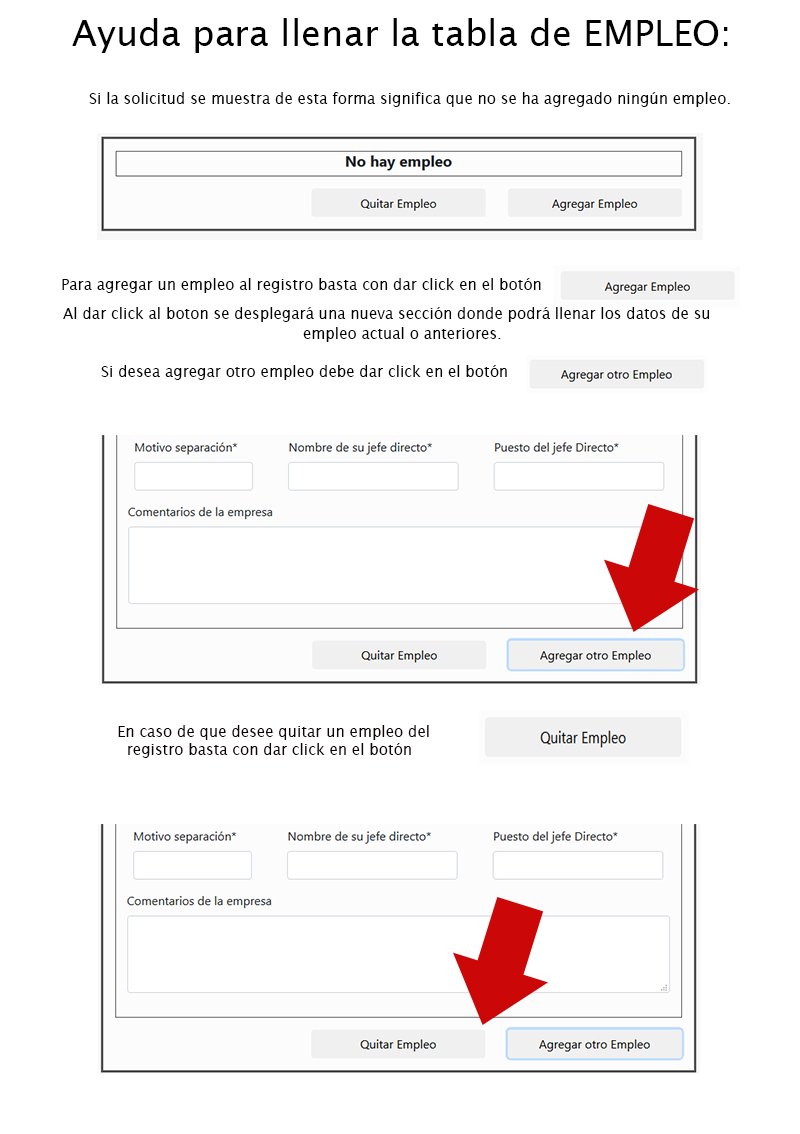
<style>
.page{position:relative;width:800px;height:1134px;background:#ffffff}
.page>*{position:absolute;margin:0}
.t1{font:36px "LucidaSans";color:#000000}
.t2{font:15px "LucidaSans";color:#000000}
.t3{font:15px "LucidaSans";color:#0e0202}
</style>
<div class="page">
<p class="t1" style="left:72px;top:18px;width:656px;height:35px">Ayuda para llenar la tabla de EMPLEO:</p>
<p class="t2" style="left:89px;top:92px;width:641px;height:15px">Si la solicitud se muestra de esta forma significa que no se ha agregado ningún empleo.</p>
<p class="t2" style="left:62px;top:278px;width:479px;height:15px">Para agregar un empleo al registro basta con dar click en el botón</p>
<p class="t2" style="left:63px;top:307px;width:647px;height:15px">Al dar click al boton se desplegará una nueva sección donde podrá llenar los datos de su</p>
<p class="t2" style="left:303px;top:327px;width:198px;height:15px">empleo actual o anteriores.</p>
<p class="t2" style="left:101px;top:365px;width:406px;height:15px">Si desea agregar otro empleo debe dar click en el botón</p>
<p class="t3" style="left:118px;top:725px;width:311px;height:33px">En caso de que desee quitar un empleo del <br>     registro basta con dar click en el botón</p>
</div>
